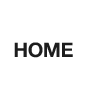
<style>
.page{position:relative;width:88px;height:100px;background:#ffffff}
.page>*{position:absolute;margin:0}
.t1{font:20px "Helvetica75-Bold";letter-spacing:-0.02em;color:#1d1d1d}
</style>
<div class="page">
<p class="t1" style="left:14px;top:42px;width:59px;height:16px">HOME</p>
</div>
